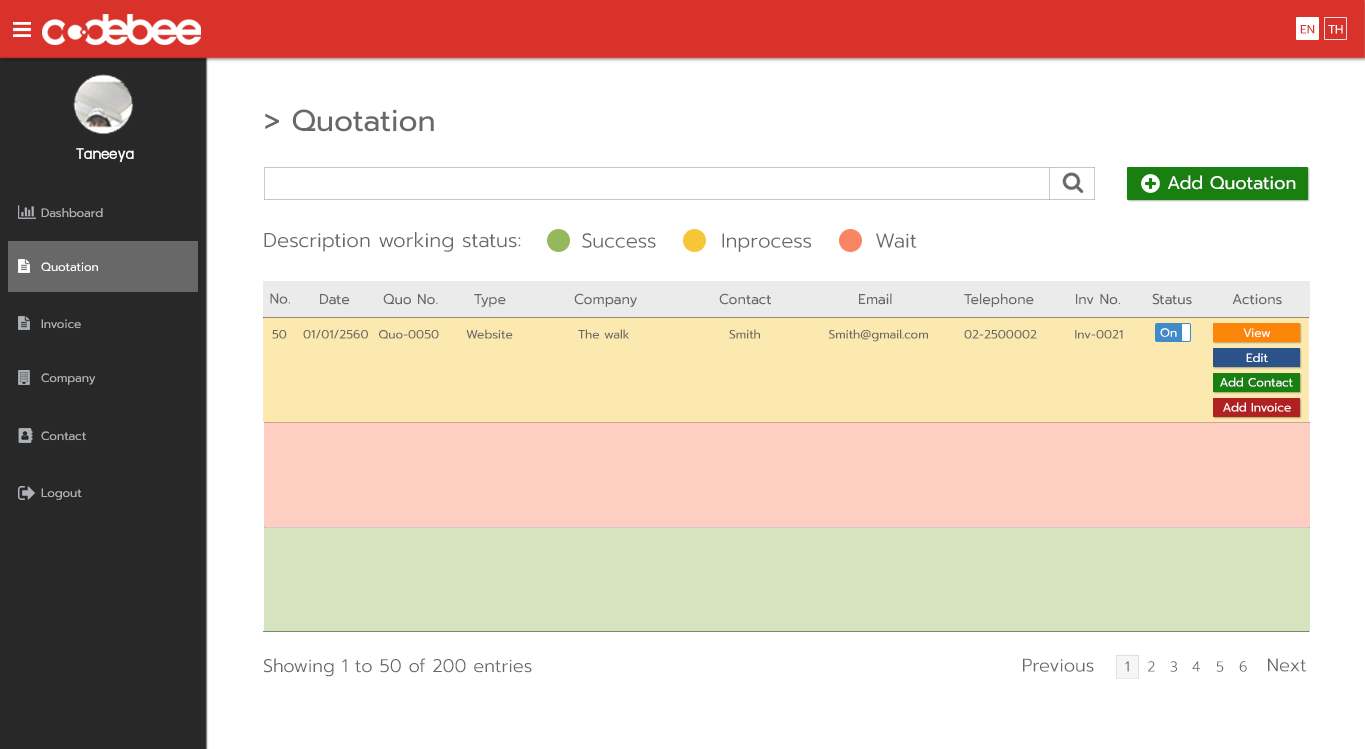
<style>
.page{position:relative;width:1365px;height:749px;background:#ffffff}
.page>*{position:absolute;margin:0}
.t1{font:12px "Prompt-Regular";color:#d8322b}
.t2{font:12px "Prompt-Regular";color:#ffffff}
.t3{font:30px "Prompt-Regular";color:#686868}
.t4{font:18px "supermarket";color:#ffffff}
.t5{font:18px "Prompt-Regular";color:#ffffff}
.t6{font:12px "Prompt-Regular";color:#aeb2b7}
.t7{font:20px "Prompt-Light";color:#686868}
.t8{font:14px "Prompt-Regular";color:#686868}
.t9{font:12px "Prompt-Regular";color:#686868}
.t10{font:18px "Prompt-Light";color:#686868}
.t11{font:14px "Prompt-Light";color:#686868}
</style>
<div class="page">
<p class="t1" style="left:1300px;top:25px;width:15px;height:9px">EN</p>
<p class="t2" style="left:1328px;top:25px;width:15px;height:9px">TH</p>
<p class="t3" style="left:265px;top:109px;width:169px;height:23px">&gt; Quotation</p>
<p class="t4" style="left:76px;top:148px;width:58px;height:14px">Taneeya</p>
<p class="t5" style="left:1167px;top:175px;width:129px;height:15px">Add Quotation</p>
<p class="t6" style="left:41px;top:208px;width:62px;height:10px">Dashboard</p>
<p class="t7" style="left:264px;top:232px;width:257px;height:20px">Description working status:</p>
<p class="t7" style="left:582px;top:233px;width:74px;height:15px">Success</p>
<p class="t7" style="left:722px;top:233px;width:89px;height:19px">Inprocess</p>
<p class="t7" style="left:876px;top:233px;width:41px;height:15px">Wait</p>
<p class="t2" style="left:41px;top:262px;width:57px;height:10px">Quotation</p>
<p class="t8" style="left:270px;top:293px;width:20px;height:11px">No.</p>
<p class="t8" style="left:320px;top:294px;width:30px;height:11px">Date</p>
<p class="t8" style="left:383px;top:293px;width:55px;height:12px">Quo No.</p>
<p class="t8" style="left:474px;top:294px;width:32px;height:13px">Type</p>
<p class="t8" style="left:574px;top:293px;width:63px;height:14px">Company</p>
<p class="t8" style="left:719px;top:293px;width:52px;height:12px">Contact</p>
<p class="t8" style="left:859px;top:293px;width:33px;height:12px">Email</p>
<p class="t8" style="left:964px;top:293px;width:70px;height:14px">Telephone</p>
<p class="t8" style="left:1076px;top:294px;width:44px;height:11px">Inv No.</p>
<p class="t8" style="left:1152px;top:293px;width:40px;height:12px">Status</p>
<p class="t8" style="left:1232px;top:294px;width:50px;height:11px">Actions</p>
<p class="t6" style="left:41px;top:319px;width:40px;height:10px">Invoice</p>
<p class="t9" style="left:272px;top:329px;width:15px;height:10px">50</p>
<p class="t9" style="left:303px;top:329px;width:65px;height:10px">01/01/2560</p>
<p class="t9" style="left:379px;top:329px;width:60px;height:10px">Quo-0050</p>
<p class="t9" style="left:466px;top:329px;width:47px;height:10px">Website</p>
<p class="t9" style="left:578px;top:329px;width:52px;height:10px">The walk</p>
<p class="t9" style="left:729px;top:329px;width:31px;height:10px">Smith</p>
<p class="t9" style="left:829px;top:329px;width:99px;height:13px">Smith@gmail.com</p>
<p class="t9" style="left:964px;top:329px;width:73px;height:10px">02-2500002</p>
<p class="t9" style="left:1075px;top:329px;width:48px;height:10px">Inv-0021</p>
<p class="t2" style="left:1160px;top:328px;width:17px;height:9px">On</p>
<p class="t2" style="left:1243px;top:328px;width:28px;height:10px">View</p>
<p class="t2" style="left:1246px;top:353px;width:22px;height:10px">Edit</p>
<p class="t6" style="left:41px;top:373px;width:55px;height:12px">Company</p>
<p class="t2" style="left:1220px;top:377px;width:73px;height:10px">Add Contact</p>
<p class="t2" style="left:1223px;top:402px;width:68px;height:10px">Add Invoice</p>
<p class="t6" style="left:41px;top:431px;width:45px;height:10px">Contact</p>
<p class="t6" style="left:41px;top:488px;width:41px;height:12px">Logout</p>
<p class="t10" style="left:264px;top:658px;width:268px;height:19px">Showing 1 to 50 of 200 entries</p>
<p class="t10" style="left:1023px;top:658px;width:71px;height:14px">Previous</p>
<p class="t11" style="left:1125px;top:661px;width:4px;height:11px">1</p>
<p class="t11" style="left:1148px;top:661px;width:7px;height:11px">2</p>
<p class="t11" style="left:1170px;top:661px;width:7px;height:11px">3</p>
<p class="t11" style="left:1192px;top:661px;width:8px;height:11px">4</p>
<p class="t11" style="left:1216px;top:661px;width:8px;height:11px">5</p>
<p class="t11" style="left:1239px;top:661px;width:8px;height:11px">6</p>
<p class="t10" style="left:1268px;top:658px;width:38px;height:14px">Next</p>
</div>
